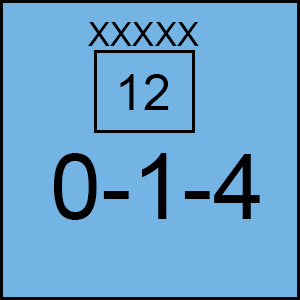
<style>
.page{position:relative;width:300px;height:300px;background:#74b4e4}
.page>*{position:absolute;margin:0}
.t1{font:33.3px "ArialMT";color:#000000}
.t2{font:50px "ArialMT";color:#000000}
.t3{font:91.7px "ArialMT";color:#000000}
</style>
<div class="page">
<p class="t1" style="left:88px;top:22px;width:111px;height:24px">XXXXX</p>
<p class="t2" style="left:120px;top:74px;width:49px;height:36px">12</p>
<p class="t3" style="left:53px;top:153px;width:207px;height:67px">0-1-4</p>
</div>
